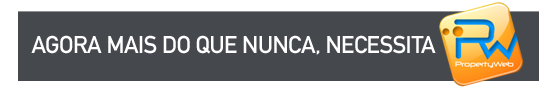
<style>
.page{position:relative;width:555px;height:101px;background:#45484d}
.page>*{position:absolute;margin:0}
.t1{font:24px "DINMittelschriftStd";letter-spacing:-0.025em;color:#ffffff;text-transform:uppercase}
</style>
<div class="page">
<p class="t1" style="left:31px;top:35px;width:405px;height:20px">Agora mais do que nunca, necessita</p>
</div>
